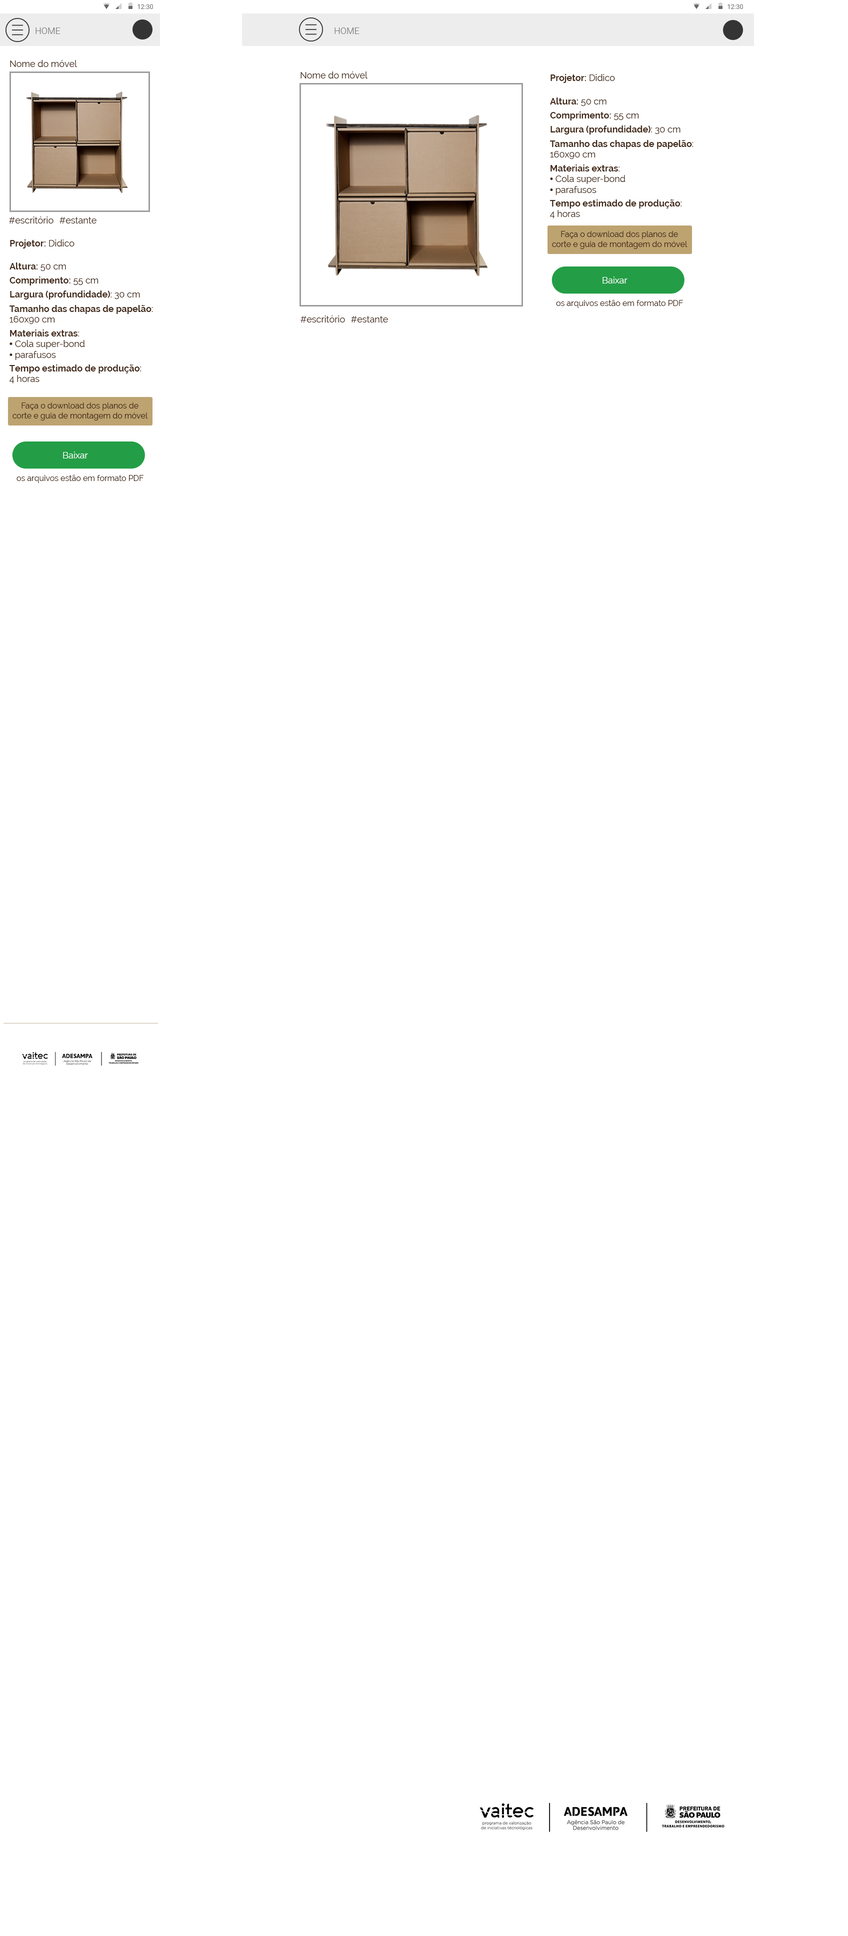
<style>
.page{position:relative;width:848px;height:1936px;background:#ffffff}
.page>*{position:absolute;margin:0}
.t1{font:9px "Roboto-Light";color:#7b7b7b}
.t2{font:9px "Raleway";color:#422918}
.t3{font:9px "Raleway-Bold";color:#422918}
.t4{font:9px "Arial-BoldMT";color:#422918}
.t5{font:8px "Raleway";color:#422918}
.t6{font:9px "Raleway";color:#fefefe}
</style>
<div class="page">
<p class="t1" style="left:36px;top:28px;width:24px;height:6px">HOME</p>
<p class="t1" style="left:334px;top:28px;width:26px;height:6px">HOME</p>
<p class="t2" style="left:10px;top:60px;width:67px;height:7px">Nome do móvel</p>
<p class="t2" style="left:300px;top:72px;width:68px;height:6px">Nome do móvel</p>
<p class="t3" style="left:550px;top:74px;width:65px;height:9px">Projetor:<span class="t2"> Didico</span></p>
<p class="t3" style="left:550px;top:98px;width:56px;height:8px">Altura:<span class="t2"> 50 cm</span></p>
<p class="t3" style="left:550px;top:112px;width:89px;height:8px">Comprimento:<span class="t2"> 55 cm</span></p>
<p class="t3" style="left:550px;top:126px;width:130px;height:8px">Largura (profundidade)<span class="t2">: 30 cm</span></p>
<p class="t3" style="left:550px;top:140px;width:144px;height:19px">Tamanho das chapas de papelão<span class="t2">: <br>160x90 cm</span></p>
<p class="t3" style="left:550px;top:164px;width:76px;height:31px">Materiais extras<span class="t2">:<br></span><span class="t4">•</span><span class="t2"> Cola super-bond<br></span><span class="t4">•</span><span class="t2"> parafusos</span></p>
<p class="t3" style="left:550px;top:200px;width:132px;height:18px">Tempo estimado de produção<span class="t2">: <br>4 horas</span></p>
<p class="t2" style="left:9px;top:216px;width:45px;height:8px">#escritório</p>
<p class="t2" style="left:60px;top:217px;width:36px;height:7px">#estante</p>
<p class="t5" style="left:552px;top:231px;width:136px;height:18px;text-align:center">Faça o download dos planos de<br>corte e guia de montagem do móvel</p>
<p class="t3" style="left:10px;top:240px;width:64px;height:8px">Projetor:<span class="t2"> Didico</span></p>
<p class="t3" style="left:10px;top:262px;width:56px;height:9px">Altura:<span class="t2"> 50 cm</span></p>
<p class="t3" style="left:10px;top:276px;width:88px;height:10px">Comprimento:<span class="t2"> 55 cm</span></p>
<p class="t6" style="left:602px;top:276px;width:26px;height:8px">Baixar</p>
<p class="t3" style="left:10px;top:290px;width:130px;height:10px">Largura (profundidade)<span class="t2">: 30 cm</span></p>
<p class="t3" style="left:10px;top:305px;width:143px;height:19px">Tamanho das chapas de papelão<span class="t2">: <br>160x90 cm</span></p>
<p class="t5" style="left:556px;top:300px;width:127px;height:8px">os arquivos estão em formato PDF</p>
<p class="t2" style="left:300px;top:316px;width:45px;height:6px">#escritório</p>
<p class="t2" style="left:351px;top:316px;width:37px;height:6px">#estante</p>
<p class="t3" style="left:10px;top:330px;width:75px;height:30px">Materiais extras<span class="t2">:<br></span><span class="t4">•</span><span class="t2"> Cola super-bond<br></span><span class="t4">•</span><span class="t2"> parafusos</span></p>
<p class="t3" style="left:10px;top:364px;width:131px;height:20px">Tempo estimado de produção<span class="t2">: <br>4 horas</span></p>
<p class="t5" style="left:12px;top:402px;width:136px;height:18px;text-align:center">Faça o download dos planos de<br>corte e guia de montagem do móvel</p>
<p class="t6" style="left:63px;top:452px;width:25px;height:6px">Baixar</p>
<p class="t5" style="left:16px;top:475px;width:128px;height:8px">os arquivos estão em formato PDF</p>
</div>
